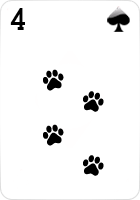
<style>
.page{position:relative;width:140px;height:200px;background:#ffffff}
.page>*{position:absolute;margin:0}
.t1{font:26px "CardCharacters";color:#000000}
</style>
<div class="page">
<p class="t1" style="left:10px;top:8px;width:15px;height:22px">4</p>
</div>
